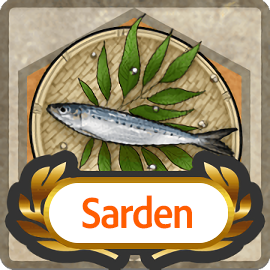
<style>
.page{position:relative;width:270px;height:270px}
.page>*{position:absolute;margin:0}
.t1{font:45px "AdobeClean-Bold";letter-spacing:-0.04em;color:#ff5d00;scale:0.9 1}
</style>
<div class="page">
<p class="t1" style="left:82px;top:195px;width:110px;height:34px">Sarden</p>
</div>
